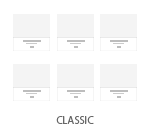
<style>
.page{position:relative;width:150px;height:130px;background:#ffffff}
.page>*{position:absolute;margin:0}
.t1{font:11px "MyriadPro-Regular";color:#686868;text-transform:uppercase}
</style>
<div class="page">
<p class="t1" style="left:56px;top:116px;width:38px;height:8px">Classic</p>
</div>
